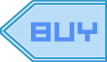
<style>
.page{position:relative;width:107px;height:62px;background:#b9ddf7}
.page>*{position:absolute;margin:0}
.t1{font:30px "imagine-font";color:#5290f8;font-weight:bold}
</style>
<div class="page">
<p class="t1" style="left:31px;top:22px;width:67px;height:20px">BUY</p>
</div>
